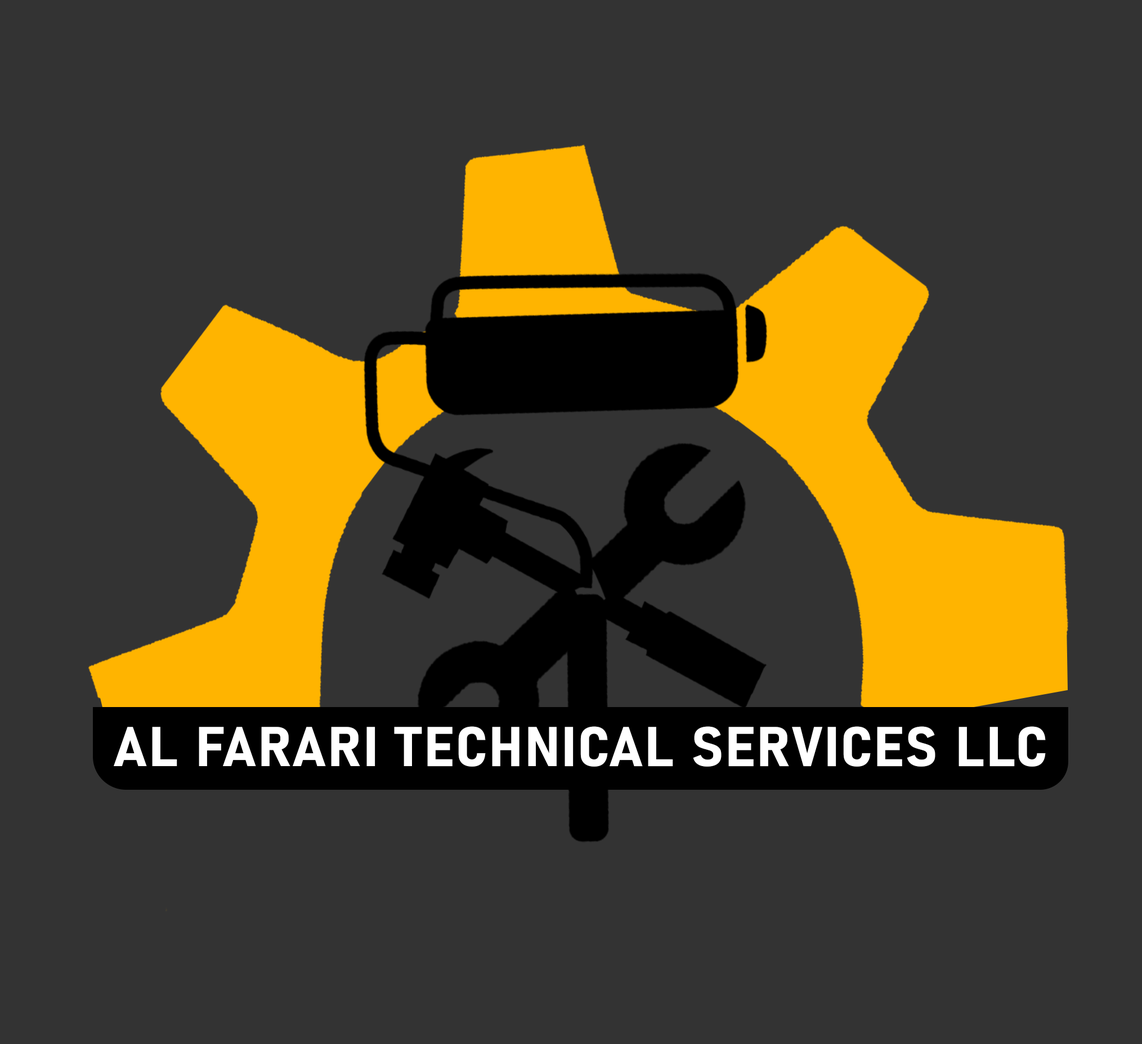
<style>
.page{position:relative;width:1142px;height:1044px;background:#333333}
.page>*{position:absolute;margin:0}
.t1{font:55.1px "Bahnschrift-BoldSemiCondensed";letter-spacing:0.02em;color:#ffffff;scale:1.14 1}
</style>
<div class="page">
<p class="t1" style="left:114px;top:726px;width:932px;height:41px">AL FARARI TECHNICAL SERVICES LLC</p>
</div>
